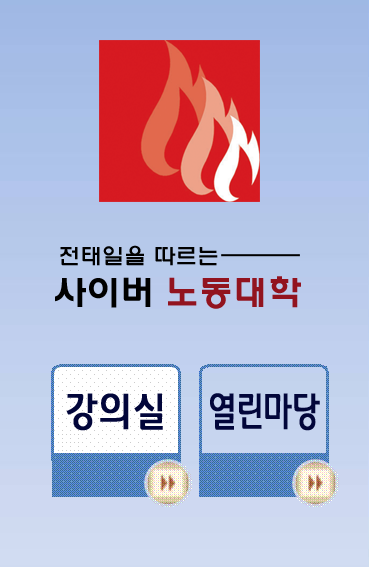
<style>
.page{position:relative;width:369px;height:567px}
.page>*{position:absolute;margin:0}
.t1{font:22px "HYwulM";color:#000000}
.t2{font:35px "HYwulB";color:#92131f}
.t3{font:35px "HYwulB";color:#000000}
.t4{font:38.5px "Daum_Regular";letter-spacing:0.01em;color:#02063a;font-weight:bold;scale:0.85 1}
.t5{font:38.5px "Daum_Regular";letter-spacing:-0.025em;color:#02063a;font-weight:bold;scale:0.73 1}
</style>
<div class="page">
<p class="t1" style="left:60px;top:245px;width:158px;height:21px">전태일을 따르는</p>
<p class="t2" style="left:55px;top:276px;width:246px;height:33px"><span class="t3">사이버 </span>노동대학</p>
<p class="t4" style="left:66px;top:393px;width:97px;height:38px">강의실</p>
<p class="t5" style="left:210px;top:393px;width:110px;height:38px">열린마당</p>
</div>
